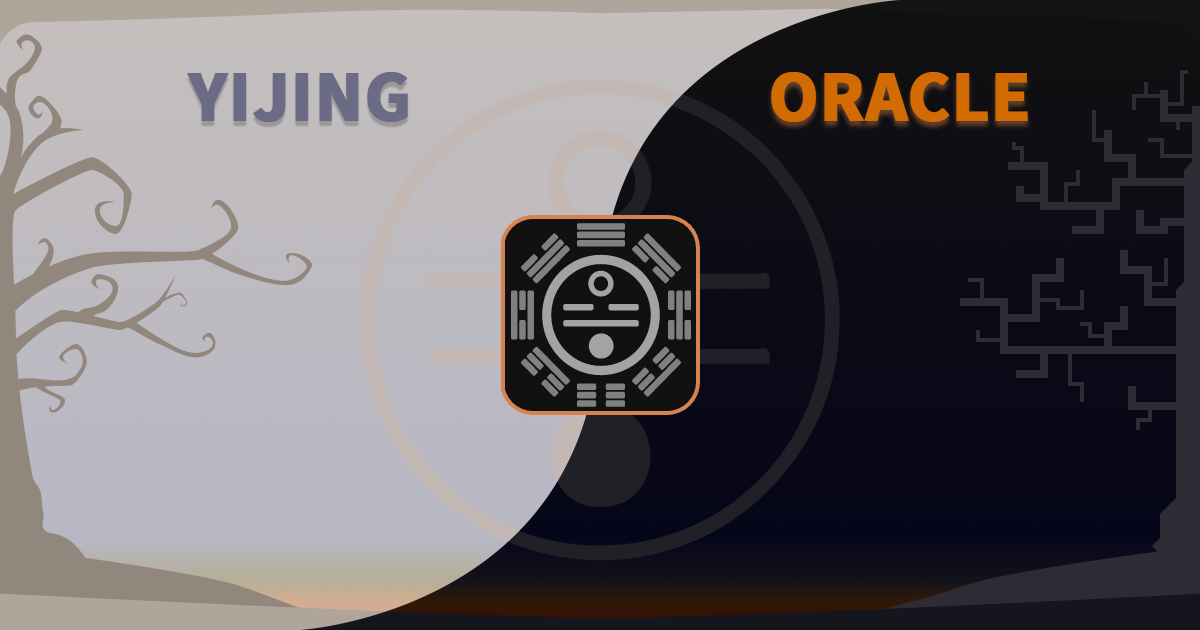
<style>
.page{position:relative;width:1200px;height:630px}
.page>*{position:absolute;margin:0}
.t1{font:72px "SourceSans3-Bold";color:#6b6b85;font-weight:bold}
.t2{font:72px "SourceSans3-Bold";color:#d26b02;font-weight:bold}
</style>
<div class="page">
<p class="t1" style="left:187px;top:72px;width:221px;height:50px">YIJING</p>
<p class="t2" style="left:771px;top:72px;width:257px;height:50px">ORACLE</p>
</div>
